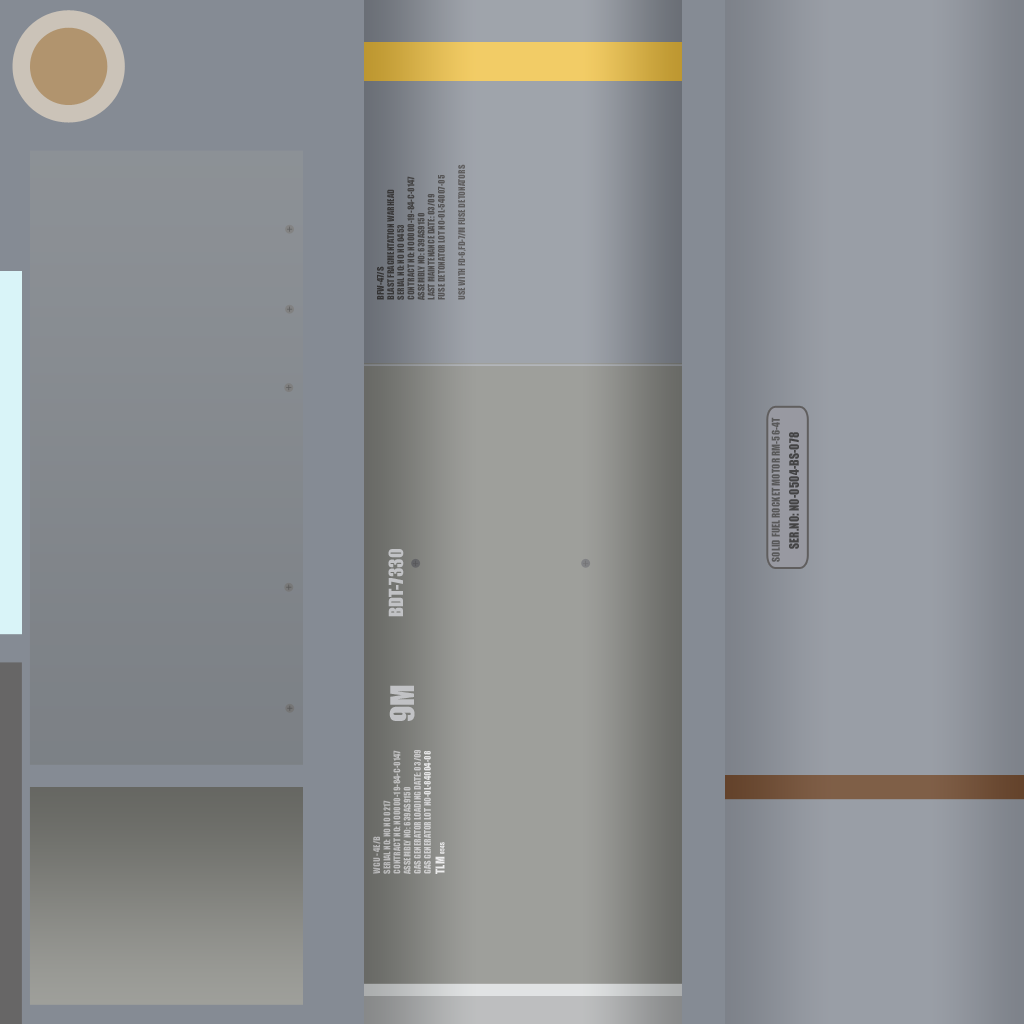
<style>
.page{position:relative;width:1024px;height:1024px}
.page>*{position:absolute;margin:0}
.t1{font:8.5px "Impact";color:#4b4a4b}
.t2{font:10px "Impact";color:#59595a}
.t3{font:12px "Impact";color:#434344}
.t4{font:18px "Impact";color:#c1c2c5}
.t5{font:30px "Impact";color:#c1c2c5}
.t6{font:8.5px "Impact";color:#c4c4c5}
.t7{font:11.3px "Impact";color:#c4c4c5}
.t8{font:5.7px "Impact";color:#c4c4c5}
</style>
<div class="page">
<p class="t1" style="left:377px;top:164px;width:89px;height:136px;rotate:-90deg">BFW-47/S<br>BLAST FRAGMENTATION WARHEAD<br>SERIAL NO: NO NO 0453<br>CONTRACT NO: NO0000-19-84-C-0147<br>ASSEMBLY NO: 639AS9150<br>LAST MAINTENANCE DATE: 03/09<br>FUSE DETONATOR LOT NO-0L-54007-05<br><br>USE WITH FD-6,FD-7/M FUSE DETONATORS</p>
<p class="t2" style="left:771px;top:417px;width:9px;height:145px;rotate:-90deg">SOLID FUEL ROCKET MOTOR RM-56-4T</p>
<p class="t3" style="left:789px;top:432px;width:10px;height:117px;rotate:-90deg">SER.NO: NO-0504-BS-078</p>
<p class="t4" style="left:388px;top:549px;width:16px;height:68px;rotate:-90deg">BDT-7330</p>
<p class="t5" style="left:389px;top:685px;width:26px;height:36px;rotate:-90deg">9M</p>
<p class="t6" style="left:373px;top:750px;width:72px;height:124px;rotate:-90deg">WGU - 4E/B<br>SERIAL NO: NO NO 0217<br>CONTRACT NO: NO0000-19-84-C-0147<br>ASSEMBLY NO: 639AS9150<br>GAS GENERATOR LOADING DATE: 03/09<br>GAS GENERATOR LOT NO-0L-84004-08<br><span class="t7">TLM </span><span class="t8">054S</span></p>
</div>
